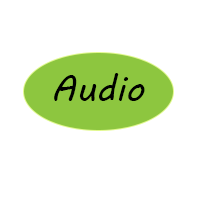
<style>
.page{position:relative;width:200px;height:200px;background:#ffffff}
.page>*{position:absolute;margin:0}
.t1{font:36px "MVBoli";color:#000000}
</style>
<div class="page">
<p class="t1" style="left:54px;top:73px;width:91px;height:28px">Audio</p>
</div>
